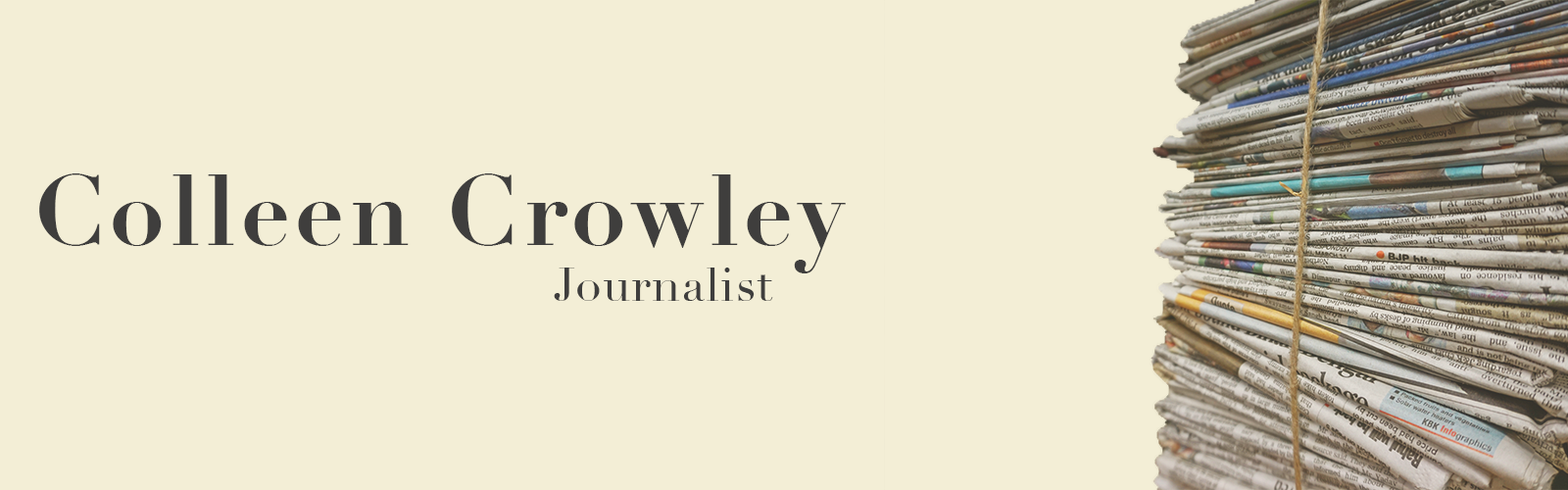
<style>
.page{position:relative;width:1568px;height:490px;background:#f3eed6}
.page>*{position:absolute;margin:0}
.t1{font:98px "Didot-Bold";letter-spacing:0.05em;color:#3f3e3d}
.t2{font:98px "Didot-Bold";letter-spacing:0.025em;color:#000000}
.t3{font:47px "Didot";letter-spacing:0.025em;color:#3f3e3d}
.t4{font:82.3px "Didot-Bold";letter-spacing:0.05em;color:#3f3e3d}
</style>
<div class="page">
<p class="t1" style="left:39px;top:173px;width:807px;height:100px"><span class="t2"><br></span>Colleen Crowley</p>
<p class="t3" style="left:554px;top:268px;width:219px;height:33px"><span class="t4"><br></span>Journalist</p>
</div>
